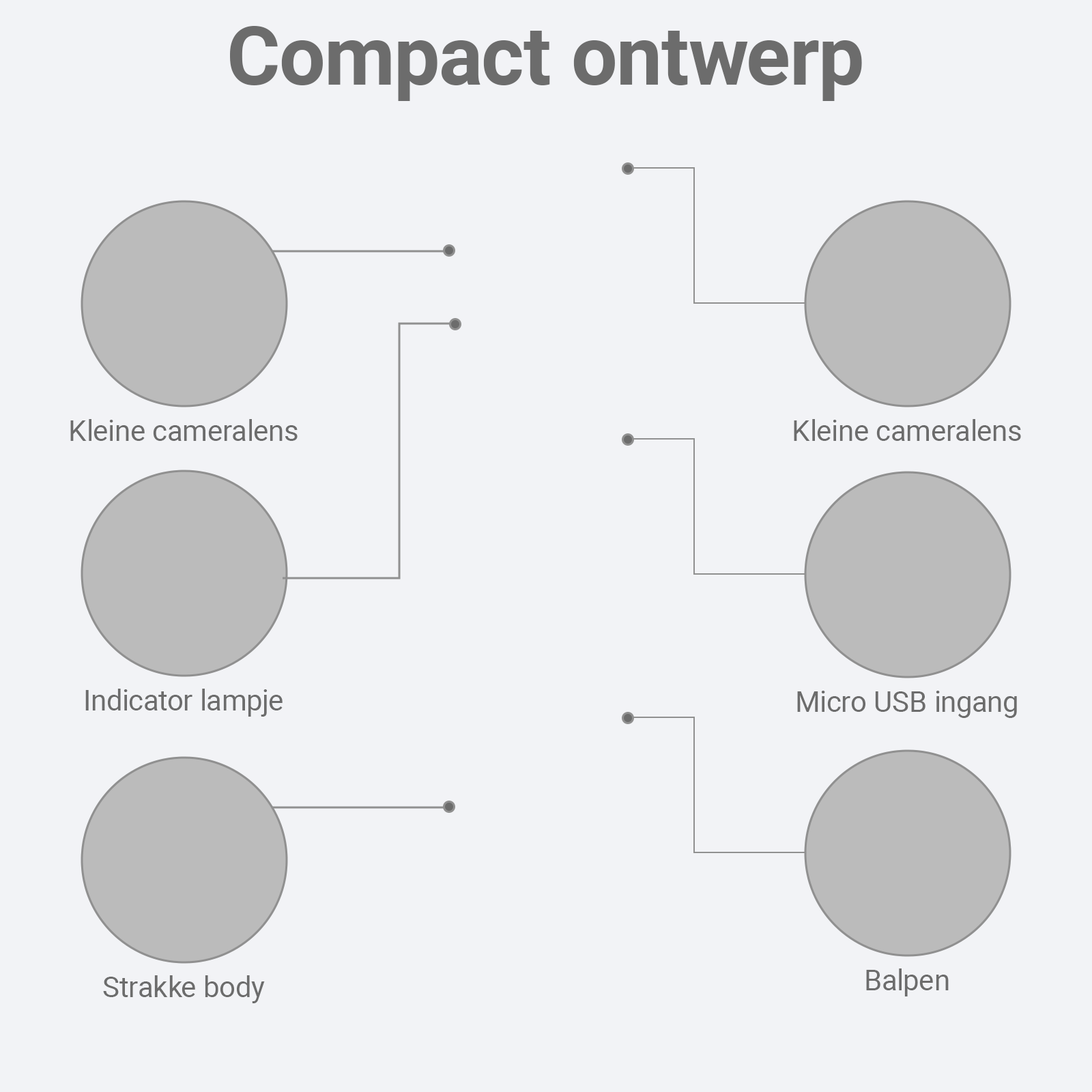
<style>
.page{position:relative;width:1092px;height:1092px;background:#f2f3f6}
.page>*{position:absolute;margin:0}
.t1{font:81.9px "Roboto-Bold";color:#6c6c6c}
.t2{font:28.7px "Roboto-Regular";color:#6c6c6c}
</style>
<div class="page">
<p class="t1" style="left:230px;top:26px;width:632px;height:75px">Compact ontwerp</p>
<p class="t2" style="left:70px;top:419px;width:228px;height:22px">Kleine cameralens</p>
<p class="t2" style="left:794px;top:419px;width:227px;height:22px">Kleine cameralens</p>
<p class="t2" style="left:85px;top:689px;width:198px;height:28px">Indicator lampje</p>
<p class="t2" style="left:797px;top:691px;width:220px;height:27px">Micro USB ingang</p>
<p class="t2" style="left:103px;top:975px;width:162px;height:28px">Strakke body</p>
<p class="t2" style="left:866px;top:968px;width:83px;height:28px">Balpen</p>
</div>
